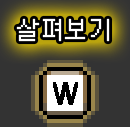
<style>
.page{position:relative;width:130px;height:127px;background:#333333}
.page>*{position:absolute;margin:0}
.t1{font:36px "Silver";color:#ffffff}
</style>
<div class="page">
<p class="t1" style="left:16px;top:18px;width:94px;height:24px">살펴보기</p>
</div>
